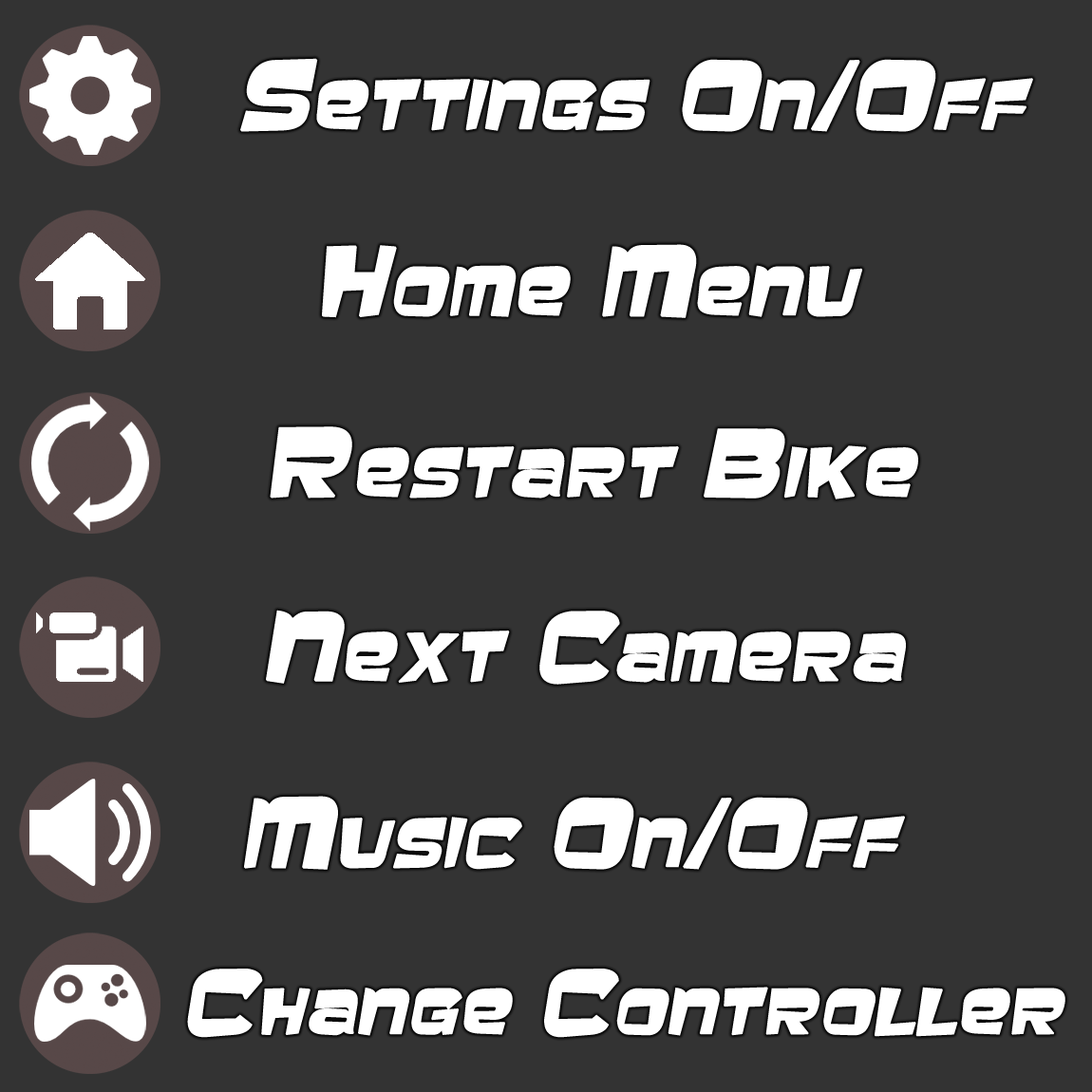
<style>
.page{position:relative;width:1092px;height:1092px;background:#333333}
.page>*{position:absolute;margin:0}
.t1{font:85.5px "Baveuse";color:#ffffff;font-variant:small-caps;font-weight:bold;font-style:italic;scale:1.1 1}
.t2{font:79.8px "Baveuse";color:#ffffff;font-variant:small-caps;font-weight:bold;font-style:italic;scale:1.1 1}
</style>
<div class="page">
<p class="t1" style="left:240px;top:58px;width:793px;height:74px">Settings On/Off</p>
<p class="t1" style="left:322px;top:244px;width:541px;height:74px">Home Menu</p>
<p class="t1" style="left:270px;top:426px;width:648px;height:73px">Restart Bike</p>
<p class="t1" style="left:266px;top:610px;width:640px;height:75px">Next Camera</p>
<p class="t1" style="left:243px;top:796px;width:662px;height:74px">Music On/Off</p>
<p class="t2" style="left:187px;top:969px;width:878px;height:69px">Change Controller</p>
</div>
